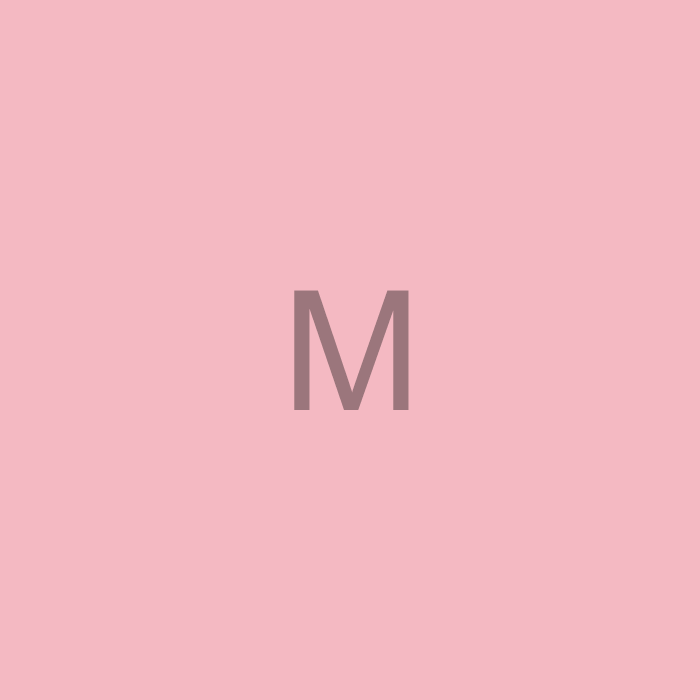
<style>
.page{position:relative;width:700px;height:700px;background:#f4b9c2}
.page>*{position:absolute;margin:0}
.t1{font:166.7px "ArialMT";color:#9b767c}
</style>
<div class="page">
<p class="t1" style="left:294px;top:290px;width:115px;height:120px">M</p>
</div>
